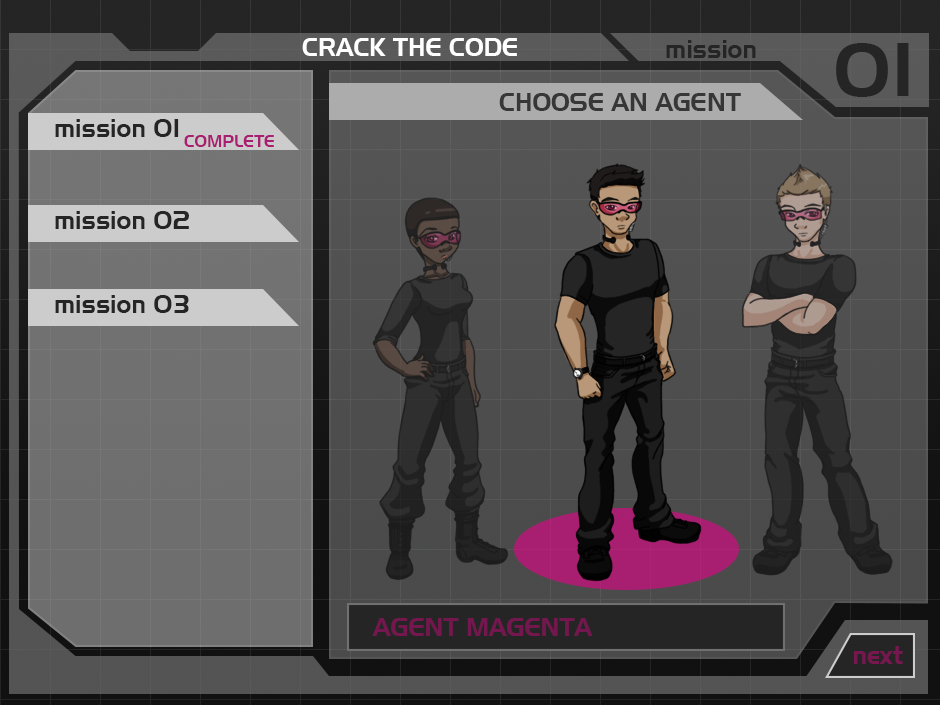
<style>
.page{position:relative;width:940px;height:705px}
.page>*{position:absolute;margin:0}
.t1{font:25px "Slider";color:#ffffff}
.t2{font:25px "Slider";color:#252525}
.t3{font:75px "Slider";color:#252525}
.t4{font:25px "Slider";color:#383737}
.t5{font:16.7px "Slider";color:#a81f71}
.t6{font:25px "Slider";color:#761750}
</style>
<div class="page">
<p class="t1" style="left:302px;top:38px;width:215px;height:18px">CRACK THE CODE</p>
<p class="t2" style="left:666px;top:40px;width:90px;height:18px">mission</p>
<p class="t3" style="left:836px;top:43px;width:73px;height:54px">01</p>
<p class="t4" style="left:499px;top:93px;width:242px;height:18px">CHOOSE AN AGENT</p>
<p class="t2" style="left:55px;top:119px;width:124px;height:18px">mission 01</p>
<p class="t5" style="left:184px;top:135px;width:90px;height:12px">COMPLETE</p>
<p class="t2" style="left:55px;top:211px;width:134px;height:18px">mission 02</p>
<p class="t2" style="left:55px;top:295px;width:134px;height:18px">mission 03</p>
<p class="t6" style="left:372px;top:618px;width:221px;height:18px">AGENT MAGENTA</p>
<p class="t6" style="left:854px;top:646px;width:49px;height:18px">next</p>
</div>
